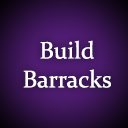
<style>
.page{position:relative;width:128px;height:128px}
.page>*{position:absolute;margin:0}
.t1{font:24px "Constantia";color:#ffffff}
</style>
<div class="page">
<p class="t1" style="left:23px;top:40px;width:88px;height:48px;text-align:center">Build<br>Barracks</p>
</div>
